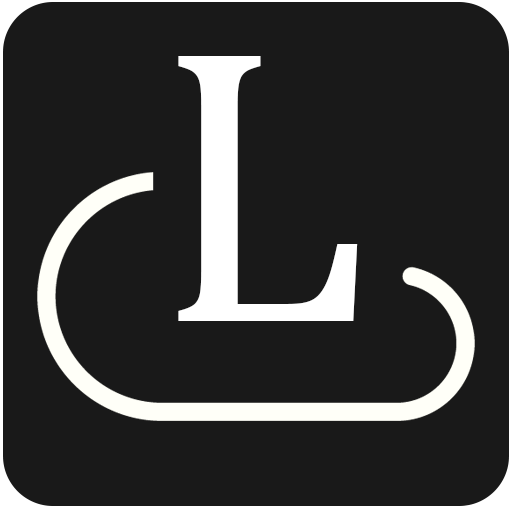
<style>
.page{position:relative;width:512px;height:512px;background:#191919}
.page>*{position:absolute;margin:0}
.t1{font:398px "Cambria";letter-spacing:0.015em;color:#ffffff}
</style>
<div class="page">
<p class="t1" style="left:178px;top:56px;width:180px;height:265px">L</p>
</div>
